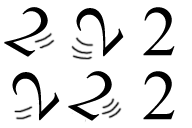
<style>
.page{position:relative;width:192px;height:128px;background:#ffffff}
.page>*{position:absolute;margin:0}
.t1{font:70.9px "TimesNewRomanPSMT";color:#000000}
</style>
<div class="page">
<p class="t1" style="left:4px;top:7px;width:44px;height:50px;rotate:30deg">2</p>
<p class="t1" style="left:76px;top:8px;width:48px;height:49px;rotate:-45deg">2</p>
<p class="t1" style="left:143px;top:7px;width:32px;height:49px">2</p>
<p class="t1" style="left:12px;top:72px;width:48px;height:49px;rotate:-45deg">2</p>
<p class="t1" style="left:68px;top:71px;width:44px;height:50px;rotate:30deg">2</p>
<p class="t1" style="left:143px;top:71px;width:32px;height:49px">2</p>
</div>
